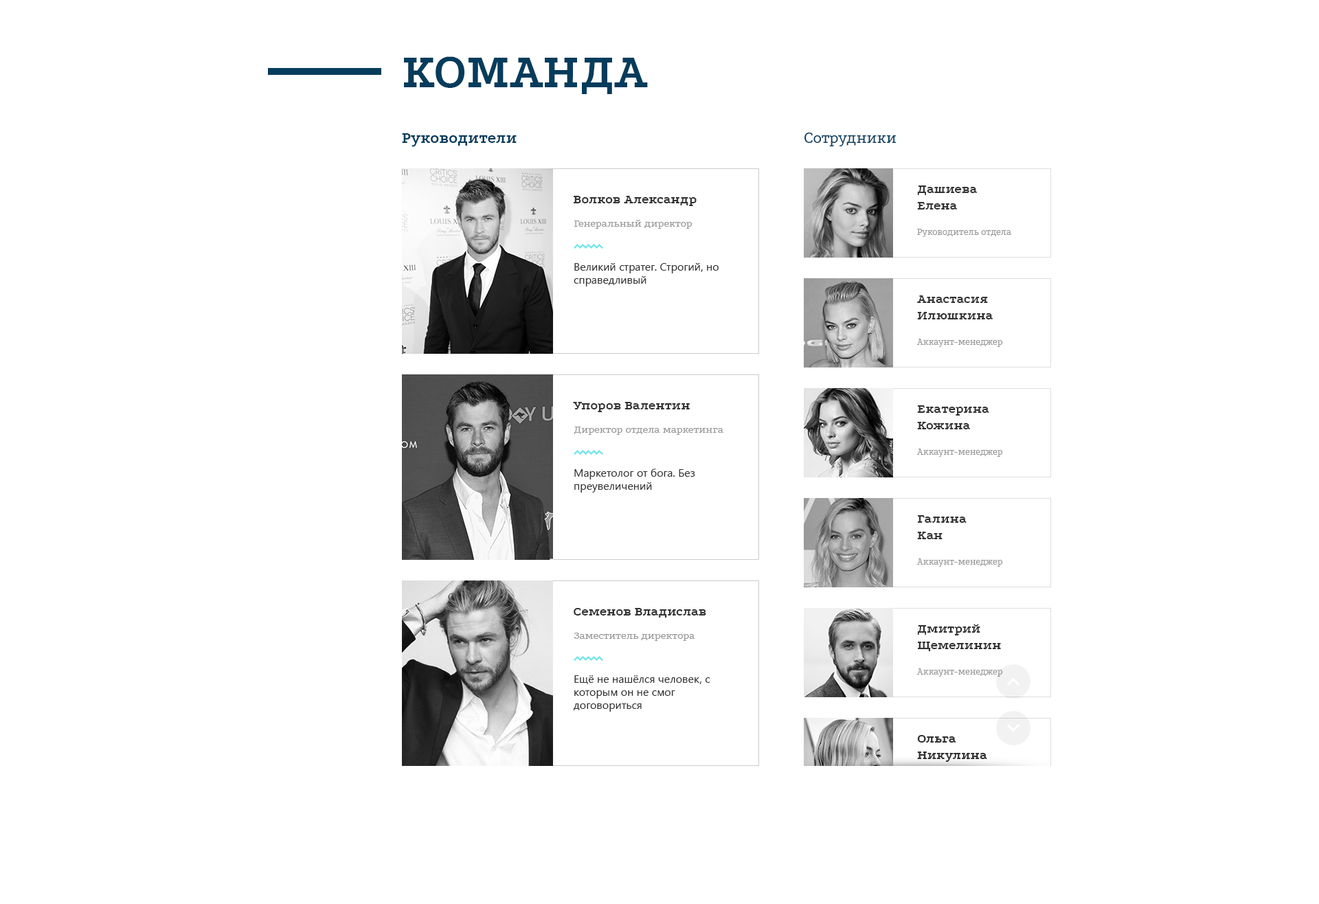
<style>
.page{position:relative;width:1319px;height:904px;background:#ffffff}
.page>*{position:absolute;margin:0}
.t1{font:49.5px "Podkova-Bold";color:#053c5c}
.t2{font:16.5px "Podkova-Bold";color:#053c5c}
.t3{font:16.5px "Podkova-Regular";color:#053c5c}
.t4{font:13.7px "Podkova-Bold";color:#333333}
.t5{font:11px "Podkova-Regular";color:#999999}
.t6{font:9.6px "Podkova-Regular";color:#999999}
.t7{font:11px "SegoeUI";color:#333333}
</style>
<div class="page">
<p class="t1" style="left:404px;top:56px;width:244px;height:38px">КОМАНДА</p>
<p class="t2" style="left:402px;top:133px;width:115px;height:14px">Руководители</p>
<p class="t3" style="left:804px;top:133px;width:92px;height:13px">Сотрудники</p>
<p class="t4" style="left:917px;top:185px;width:61px;height:25px">Дашиева<br>Елена</p>
<p class="t4" style="left:574px;top:196px;width:123px;height:10px">Волков Александр</p>
<p class="t5" style="left:574px;top:220px;width:118px;height:9px">Генеральный директор</p>
<p class="t6" style="left:917px;top:229px;width:95px;height:8px">Руководитель отдела</p>
<p class="t7" style="left:574px;top:263px;width:145px;height:23px">Великий стратег. Строгий, но справедливый</p>
<p class="t4" style="left:917px;top:295px;width:76px;height:24px">Анастасия Илюшкина</p>
<p class="t6" style="left:916px;top:339px;width:87px;height:8px">Аккаунт-менеджер</p>
<p class="t4" style="left:573px;top:402px;width:117px;height:10px">Упоров Валентин</p>
<p class="t4" style="left:917px;top:405px;width:72px;height:24px">Екатерина Кожина</p>
<p class="t5" style="left:574px;top:427px;width:149px;height:8px">Директор отдела маркетинга</p>
<p class="t6" style="left:916px;top:449px;width:87px;height:8px">Аккаунт-менеджер</p>
<p class="t7" style="left:574px;top:469px;width:121px;height:24px">Маркетолог от бога. Без преувеличений</p>
<p class="t4" style="left:917px;top:515px;width:50px;height:24px">Галина Кан</p>
<p class="t6" style="left:916px;top:559px;width:87px;height:8px">Аккаунт-менеджер</p>
<p class="t4" style="left:574px;top:608px;width:132px;height:10px">Семенов Владислав</p>
<p class="t4" style="left:917px;top:624px;width:84px;height:27px">Дмитрий Щемелинин</p>
<p class="t5" style="left:574px;top:633px;width:121px;height:8px">Заместитель директора</p>
<p class="t7" style="left:574px;top:675px;width:136px;height:37px">Ещё не нашёлся человек, с которым он не смог договориться</p>
<p class="t6" style="left:916px;top:668px;width:87px;height:9px">Аккаунт-менеджер</p>
</div>
